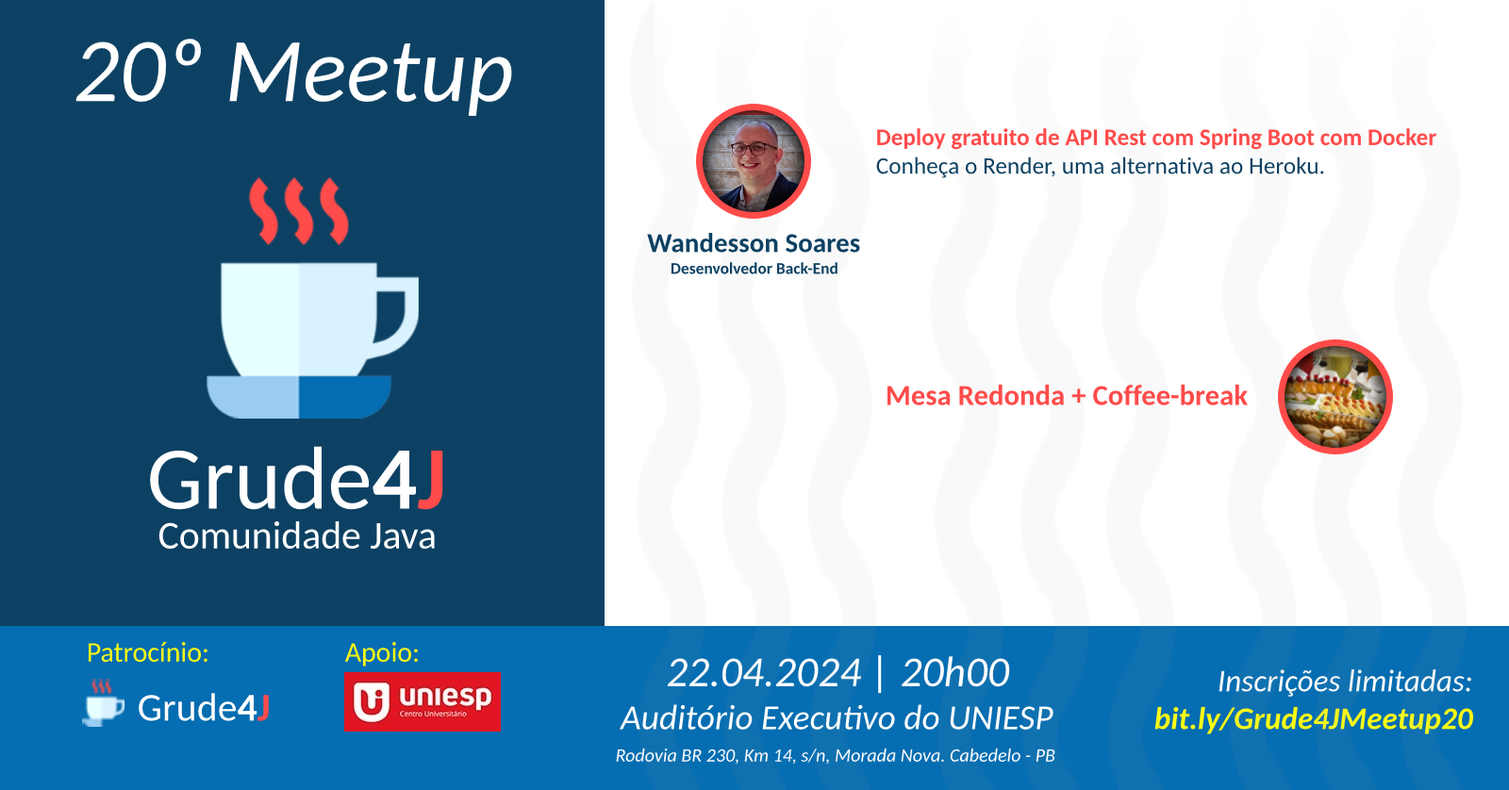
<style>
.page{position:relative;width:1509px;height:790px;background:#0d4163}
.page>*{position:absolute;margin:0}
.t1{font:91.3px "Carlito-Italic";color:#ffffff}
.t2{font:23.8px "Carlito-Bold";color:#ff4b4a}
.t3{font:23.8px "Carlito";color:#0d4163}
.t4{font:27.3px "Carlito-Bold";color:#0d4163}
.t5{font:16.4px "Carlito-Bold";color:#0d4163}
.t6{font:29px "Carlito-Bold";color:#ff4b4a}
.t7{font:89.3px "Carlito";color:#ffffff}
.t8{font:89.3px "Carlito-Bold";color:#ffffff}
.t9{font:89.3px "Carlito-Bold";color:#ff4b4a}
.t10{font:39.3px "Carlito";color:#ffffff}
.t11{font:42.8px "Carlito-Italic";color:#ffffff}
.t12{font:31.4px "Carlito-BoldItalic";color:#fcfb14}
.t13{font:31.4px "Carlito-Italic";color:#ffffff}
.t14{font:39.4px "Carlito";color:#ffffff}
.t15{font:39.4px "Carlito-Bold";color:#ffffff}
.t16{font:39.4px "Carlito-Bold";color:#ff4b4a}
.t17{font:35.3px "Carlito-Italic";color:#ffffff}
.t18{font:18.9px "Carlito-Italic";color:#ffffff}
</style>
<div class="page">
<p class="t1" style="left:75px;top:39px;width:437px;height:77px">20º Meetup</p>
<p class="t2" style="left:876px;top:128px;width:560px;height:50px">Deploy gratuito de API Rest com Spring Boot com Docker<br><span class="t3">Conheça o Render, uma alternativa ao Heroku.</span></p>
<p class="t4" style="left:647px;top:232px;width:213px;height:21px">Wandesson Soares</p>
<p class="t5" style="left:671px;top:262px;width:166px;height:12px">Desenvolvedor Back-End</p>
<p class="t6" style="left:886px;top:384px;width:362px;height:22px">Mesa Redonda + Coffee-break</p>
<p class="t7" style="left:150px;top:446px;width:293px;height:64px">Grude<span class="t8">4</span><span class="t9">J</span></p>
<p class="t10" style="left:158px;top:522px;width:277px;height:27px">Comunidade Java</p>
<p class="t11" style="left:667px;top:655px;width:343px;height:39px">22.04.2024 | 20h00</p>
<p class="t12" style="left:1154px;top:670px;width:320px;height:65px;text-align:right"><span class="t13">Inscrições limitadas:<br></span>bit.ly/Grude4JMeetup20</p>
<p class="t14" style="left:139px;top:693px;width:130px;height:28px">Grude<span class="t15">4</span><span class="t16">J</span></p>
<p class="t17" style="left:619px;top:704px;width:434px;height:26px">Auditório Executivo do UNIESP</p>
<p class="t18" style="left:616px;top:748px;width:439px;height:17px">Rodovia BR 230, Km 14, s/n, Morada Nova. Cabedelo - PB</p>
</div>
